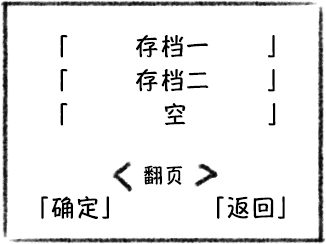
<style>
.page{position:relative;width:326px;height:244px;background:#ffffff}
.page>*{position:absolute;margin:0}
.t1{font:12px/1125.5px "HannotateSC-W7";letter-spacing:0.055em;color:#000000}
.t2{font:20px "HannotateSC-W7";letter-spacing:0.055em;color:#000000}
</style>
<div class="page">
<p class="t1" style="left:60px;top:34px;width:215px;height:24px">「       存档一      」</p>
<p class="t1" style="left:60px;top:68px;width:215px;height:24px">「       存档二      」</p>
<p class="t1" style="left:60px;top:103px;width:216px;height:23px">「          空         」</p>
<p class="t2" style="left:143px;top:165px;width:40px;height:20px">翻页</p>
<p class="t1" style="left:41px;top:196px;width:244px;height:23px">「确定」        「返回」</p>
</div>
